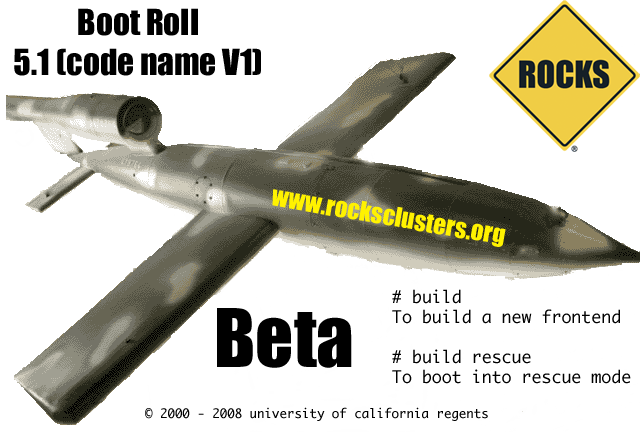
<style>
.page{position:relative;width:640px;height:432px;background:#ffffff}
.page>*{position:absolute;margin:0}
.t1{font:33.2px "Impact";color:#000000}
.t2{font:24.9px "Impact";color:#fff200}
.t3{font:16.6px "Monaco";color:#000000}
.t4{font:74.7px "Impact";color:#000000}
.t5{font:12.5px "Monaco";color:#000000}
</style>
<div class="page">
<p class="t1" style="left:14px;top:8px;width:247px;height:68px;text-align:center">Boot Roll<br>5.1 (code name V1)</p>
<p class="t2" style="left:272px;top:189px;width:234px;height:58px;rotate:10deg">www.rocksclusters.org</p>
<p class="t3" style="left:392px;top:289px;width:239px;height:95px"># build<br>To build a new frontend<br><br># build rescue<br>To boot into rescue mode</p>
<p class="t4" style="left:217px;top:308px;width:135px;height:60px">Beta</p>
<p class="t5" style="left:145px;top:407px;width:343px;height:14px">© 2000 - 2008 university of california regents</p>
</div>
